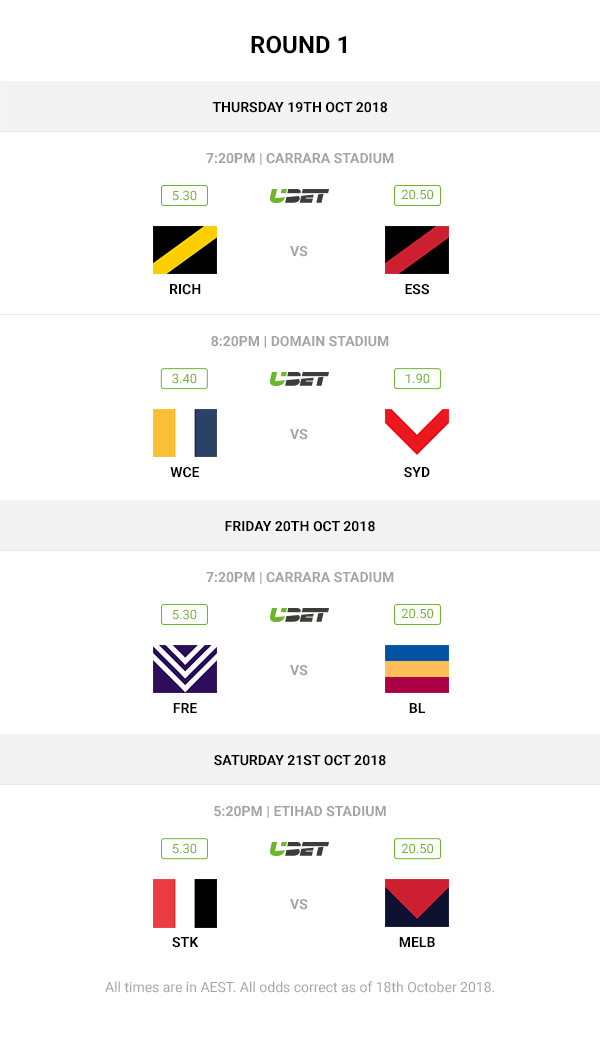
<style>
.page{position:relative;width:600px;height:1038px;background:#ffffff}
.page>*{position:absolute;margin:0}
.t1{font:24px "Roboto-Bold";color:#000000}
.t2{font:14px "Roboto-Bold";color:#000000}
.t3{font:14px "Roboto-Bold";color:#a3a3a3}
.t4{font:12.8px "Roboto-Regular";color:#6cb52d}
.t5{font:12.7px "Roboto-Regular";color:#6cb52d}
.t6{font:12.9px "Roboto-Regular";color:#6cb52d}
.t7{font:14px "Roboto-Regular";color:#a3a3a3}
</style>
<div class="page">
<p class="t1" style="left:251px;top:35px;width:95px;height:19px">ROUND 1</p>
<p class="t2" style="left:212px;top:102px;width:175px;height:11px">THURSDAY 19TH OCT 2018</p>
<p class="t3" style="left:206px;top:153px;width:188px;height:12px">7:20PM | CARRARA STADIUM</p>
<p class="t4" style="left:172px;top:190px;width:25px;height:11px">5.30</p>
<p class="t5" style="left:401px;top:189px;width:32px;height:11px">20.50</p>
<p class="t3" style="left:290px;top:246px;width:18px;height:11px">VS</p>
<p class="t2" style="left:170px;top:284px;width:31px;height:11px">RICH</p>
<p class="t2" style="left:405px;top:284px;width:24px;height:11px">ESS</p>
<p class="t3" style="left:211px;top:336px;width:178px;height:12px">8:20PM | DOMAIN STADIUM</p>
<p class="t6" style="left:172px;top:373px;width:25px;height:11px">3.40</p>
<p class="t5" style="left:405px;top:373px;width:25px;height:11px">1.90</p>
<p class="t3" style="left:290px;top:429px;width:18px;height:11px">VS</p>
<p class="t2" style="left:170px;top:467px;width:29px;height:11px">WCE</p>
<p class="t2" style="left:404px;top:467px;width:26px;height:11px">SYD</p>
<p class="t2" style="left:225px;top:521px;width:150px;height:11px">FRIDAY 20TH OCT 2018</p>
<p class="t3" style="left:206px;top:572px;width:188px;height:12px">7:20PM | CARRARA STADIUM</p>
<p class="t4" style="left:172px;top:609px;width:25px;height:11px">5.30</p>
<p class="t5" style="left:401px;top:608px;width:32px;height:11px">20.50</p>
<p class="t3" style="left:290px;top:665px;width:18px;height:11px">VS</p>
<p class="t2" style="left:173px;top:703px;width:24px;height:10px">FRE</p>
<p class="t2" style="left:409px;top:703px;width:16px;height:10px">BL</p>
<p class="t2" style="left:214px;top:755px;width:172px;height:11px">SATURDAY 21ST OCT 2018</p>
<p class="t3" style="left:214px;top:806px;width:172px;height:12px">5:20PM | ETIHAD STADIUM</p>
<p class="t4" style="left:172px;top:843px;width:25px;height:11px">5.30</p>
<p class="t5" style="left:401px;top:843px;width:32px;height:11px">20.50</p>
<p class="t3" style="left:290px;top:899px;width:18px;height:11px">VS</p>
<p class="t2" style="left:172px;top:937px;width:27px;height:11px">STK</p>
<p class="t2" style="left:399px;top:937px;width:36px;height:10px">MELB</p>
<p class="t7" style="left:105px;top:981px;width:389px;height:12px">All times are in AEST. All odds correct as of 18th October 2018.</p>
</div>
